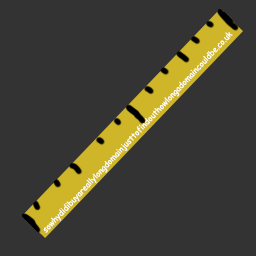
<style>
.page{position:relative;width:256px;height:256px;background:#333333}
.page>*{position:absolute;margin:0}
.t1{font:8.3px "ComicSansMS";color:#ffffff;scale:0.96 1}
</style>
<div class="page">
<p class="t1" style="left:43px;top:32px;width:190px;height:201px;rotate:-47deg">sowhydidibuyareallylongdomainjusttofindouthowlongadomaincouldbe.co.uk</p>
</div>
